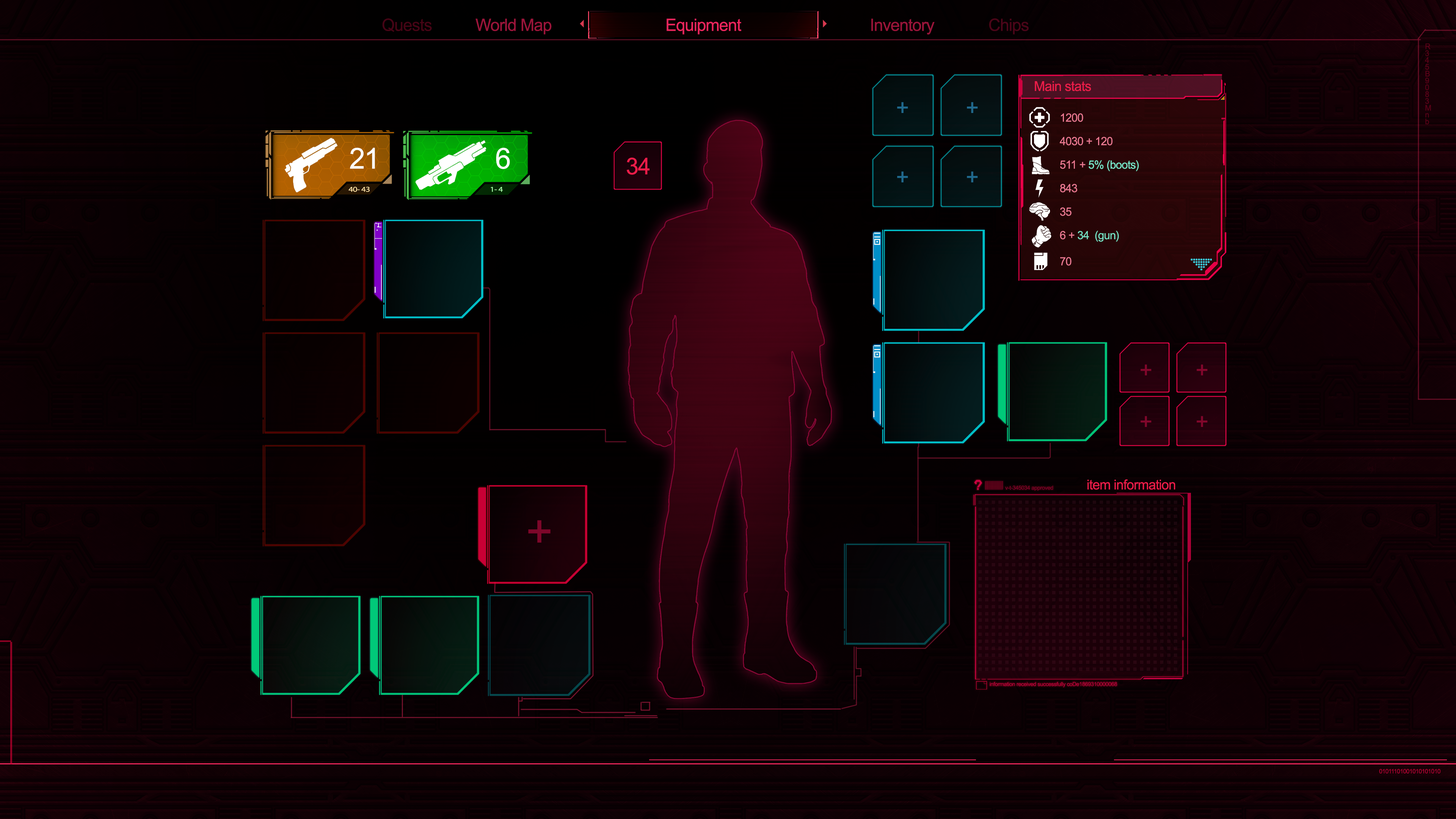
<style>
.page{position:relative;width:1456px;height:819px}
.page>*{position:absolute;margin:0}
.t1{font:17px "ArialNarrow";letter-spacing:-0.025em;color:#450415;scale:1.2 1}
.t2{font:17px "ArialNarrow";letter-spacing:-0.025em;color:#9a153a;scale:1.2 1}
.t3{font:17px "ArialNarrow";letter-spacing:-0.025em;color:#eb265d;scale:1.2 1}
.t4{font:17px "ArialNarrow";letter-spacing:-0.025em;color:#99153a;scale:1.2 1}
.t5{font:17px "ArialNarrow";letter-spacing:-0.025em;color:#4b0519;scale:1.2 1}
.t6{font:7.8px/6.8px "ArialNarrow";letter-spacing:-0.025em;color:#590118;scale:1.2 1}
.t7{font:13.6px "ArialNarrow";letter-spacing:-0.025em;color:#ec1d49;scale:1.2 1}
.t8{font:22.7px "ArialNarrow";letter-spacing:-0.025em;color:#1f698d;scale:1.2 1}
.t9{font:22.7px "ArialNarrow";letter-spacing:-0.025em;color:#21698d;scale:1.2 1}
.t10{font:11.4px "ArialNarrow";letter-spacing:-0.025em;color:#eb7991;scale:1.2 1}
.t11{font:28.9px "ArialNarrow";letter-spacing:-0.025em;color:#ffffff;scale:1.2 1}
.t12{font:23.2px "ArialNarrow";letter-spacing:-0.025em;color:#ec1d49;scale:1.2 1}
.t13{font:11.4px "ArialNarrow";letter-spacing:-0.025em;color:#79ebcc;scale:1.2 1}
.t14{font:7.4px "MyriadPro-Regular";letter-spacing:-0.025em;color:#ffe3a7;scale:1.2 1}
.t15{font:7.4px "MyriadPro-Regular";letter-spacing:-0.025em;color:#a7ffa7;scale:1.2 1}
.t16{font:11.4px "ArialNarrow";letter-spacing:-0.025em;color:#76e4c6;scale:1.2 1}
.t17{font:22.7px "ArialNarrow";letter-spacing:-0.025em;color:#80072b;scale:1.2 1}
.t18{font:22.7px "ArialNarrow";letter-spacing:-0.025em;color:#82072c;scale:1.2 1}
.t19{font:22.7px "ArialNarrow";letter-spacing:-0.025em;color:#81072b;scale:1.2 1}
.t20{font:46.9px "ArialNarrow";letter-spacing:-0.025em;color:#7d072a;scale:1.2 1}
.t21{font:6px "ArialNarrow";letter-spacing:-0.025em;color:#ad0332;scale:1.2 1}
</style>
<div class="page">
<p class="t1" style="left:382px;top:18px;width:50px;height:14px">Quests</p>
<p class="t2" style="left:475px;top:19px;width:77px;height:16px">World Map</p>
<p class="t3" style="left:667px;top:19px;width:74px;height:16px">Equipment</p>
<p class="t4" style="left:871px;top:19px;width:64px;height:16px">Inventory</p>
<p class="t5" style="left:989px;top:18px;width:40px;height:17px">Chips</p>
<p class="t6" style="left:1425px;top:43px;width:6px;height:81px">R<br>3<br>4<br>5<br>B<br>9<br>0<br>8<br>3<br>M<br>n<br>b</p>
<p class="t7" style="left:1035px;top:81px;width:56px;height:10px">Main stats</p>
<p class="t8" style="left:897px;top:102px;width:11px;height:11px">+</p>
<p class="t9" style="left:967px;top:102px;width:11px;height:11px">+</p>
<p class="t10" style="left:1061px;top:113px;width:22px;height:9px">1200</p>
<p class="t10" style="left:1060px;top:137px;width:52px;height:9px">4030 + 120</p>
<p class="t11" style="left:350px;top:147px;width:25px;height:22px">21</p>
<p class="t11" style="left:496px;top:147px;width:14px;height:22px">6</p>
<p class="t12" style="left:627px;top:157px;width:23px;height:18px">34</p>
<p class="t13" style="left:1060px;top:160px;width:79px;height:11px"><span class="t10">511 + </span>5% (boots)</p>
<p class="t8" style="left:897px;top:171px;width:11px;height:11px">+</p>
<p class="t8" style="left:967px;top:171px;width:11px;height:11px">+</p>
<p class="t10" style="left:1060px;top:184px;width:17px;height:9px">843</p>
<p class="t14" style="left:348px;top:187px;width:22px;height:5px">40- 43</p>
<p class="t15" style="left:491px;top:187px;width:12px;height:5px">1- 4</p>
<p class="t10" style="left:1060px;top:207px;width:12px;height:9px">35</p>
<p class="t16" style="left:1060px;top:231px;width:59px;height:11px"><span class="t10">6 + </span>34  (gun)</p>
<p class="t10" style="left:1060px;top:257px;width:12px;height:9px">70</p>
<p class="t17" style="left:1141px;top:364px;width:11px;height:11px">+</p>
<p class="t18" style="left:1197px;top:364px;width:11px;height:11px">+</p>
<p class="t17" style="left:1141px;top:416px;width:11px;height:11px">+</p>
<p class="t19" style="left:1197px;top:416px;width:11px;height:11px">+</p>
<p class="t7" style="left:1087px;top:479px;width:88px;height:11px">item information</p>
<p class="t20" style="left:528px;top:520px;width:23px;height:23px">+</p>
<p class="t21" style="left:1379px;top:769px;width:61px;height:4px">01011101001010101010</p>
</div>
